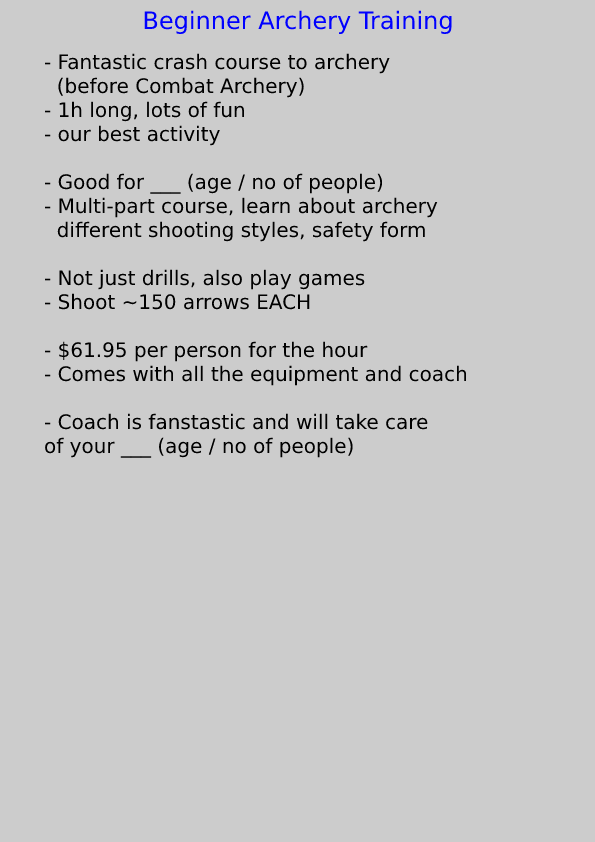
<style>
.page{position:relative;width:595px;height:842px;background:#cccccc}
.page>*{position:absolute;margin:0}
.t1{font:24px "DejaVuSans";color:#0000ff}
.t2{font:20px "DejaVuSans";color:#000000}
</style>
<div class="page">
<p class="t1" style="left:144px;top:10px;width:308px;height:24px">Beginner Archery Training</p>
<p class="t2" style="left:44px;top:53px;width:423px;height:405px">- Fantastic crash course to archery<br>  (before Combat Archery)<br>- 1h long, lots of fun<br>- our best activity<br><br>- Good for ___ (age / no of people)<br>- Multi-part course, learn about archery<br>  different shooting styles, safety form<br><br>- Not just drills, also play games<br>- Shoot ~150 arrows EACH<br><br>- $61.95 per person for the hour<br>- Comes with all the equipment and coach<br><br>- Coach is fanstastic and will take care<br>of your ___ (age / no of people)</p>
</div>
